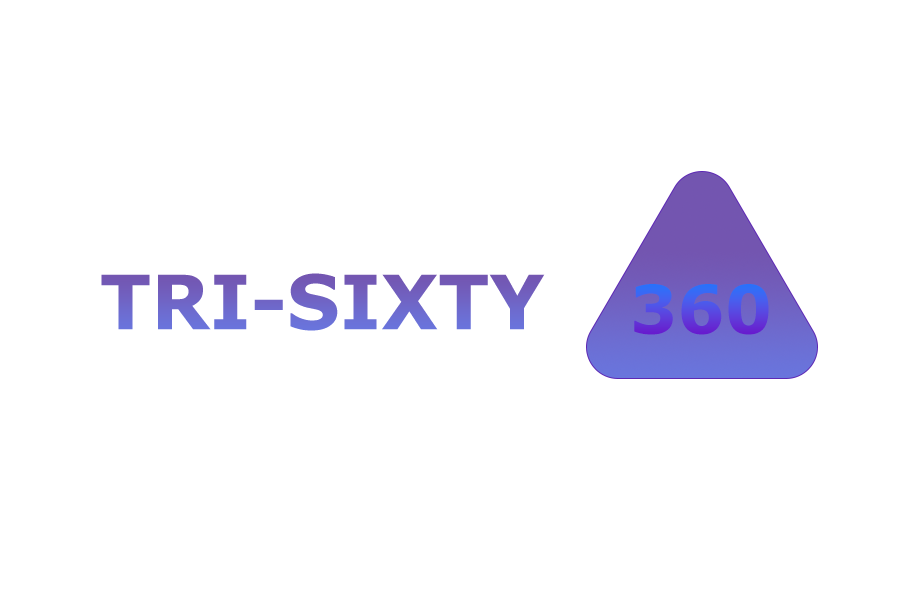
<style>
.page{position:relative;width:900px;height:600px;background:#ffffff}
.page>*{position:absolute;margin:0}
.t1{font:75px "Verdana-Bold";color:#7063c3}
.t2{font:66.7px "Verdana-Bold"}
</style>
<div class="page">
<p class="t1" style="left:101px;top:273px;width:444px;height:58px">TRI-SIXTY</p>
<p class="t2" style="left:634px;top:284px;width:135px;height:51px">360</p>
</div>
